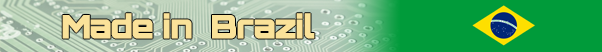
<style>
.page{position:relative;width:602px;height:52px;background:#009b3a}
.page>*{position:absolute;margin:0}
.t1{font:32px "Orbitron-Black";letter-spacing:-0.05em;color:#fae299;font-weight:bold}
</style>
<div class="page">
<p class="t1" style="left:62px;top:13px;width:253px;height:26px">Made in  Brazil</p>
</div>
